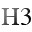
<style>
.page{position:relative;width:32px;height:32px;background:#ffffff}
.page>*{position:absolute;margin:0}
.t1{font:25px "Times-Roman"}
</style>
<div class="page">
<p class="t1" style="left:1px;top:8px;width:30px;height:17px">H3</p>
</div>
